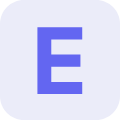
<style>
.page{position:relative;width:120px;height:120px;background:#ebecf9}
.page>*{position:absolute;margin:0}
.t1{font:89.4px "PlusJakartaSans-ExtraBold";color:#6366f1}
</style>
<div class="page">
<p class="t1" style="left:37px;top:27px;width:46px;height:67px">E</p>
</div>
